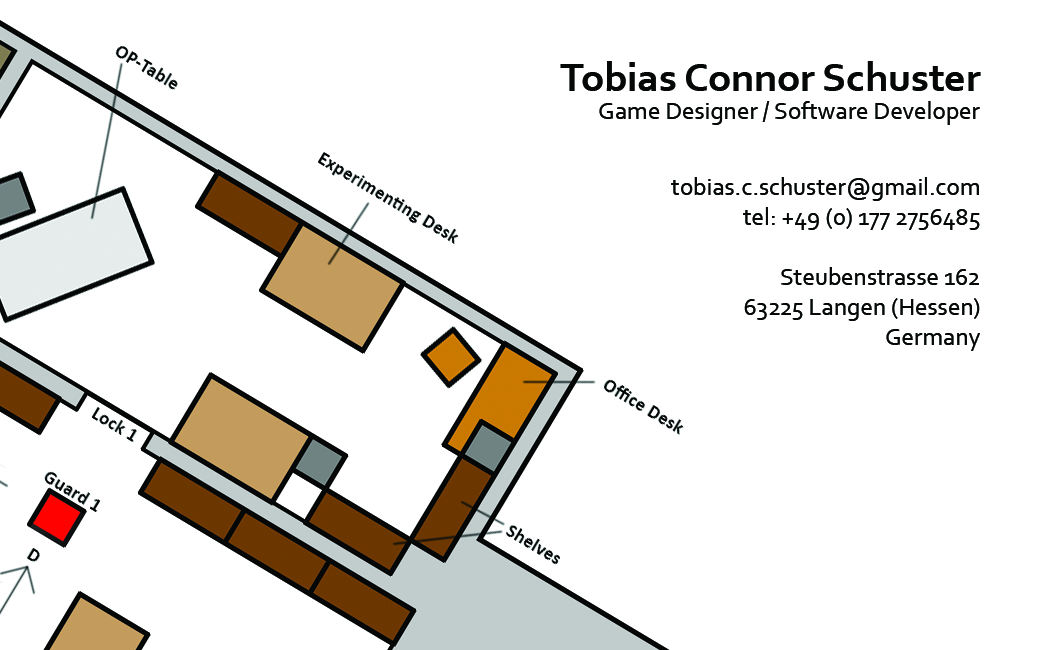
<style>
.page{position:relative;width:1039px;height:650px;background:#ffffff}
.page>*{position:absolute;margin:0}
.t1{font:41.7px "Corbel-Bold";color:#060808}
.t2{font:25px "Corbel";color:#060808}
</style>
<div class="page">
<p class="t1" style="left:560px;top:61px;width:421px;height:30px">Tobias Connor Schuster</p>
<p class="t2" style="left:599px;top:101px;width:381px;height:24px">Game Designer / Software Developer</p>
<p class="t2" style="left:671px;top:177px;width:309px;height:174px;text-align:right">tobias.c.schuster@gmail.com<br>tel: +49 (0) 177 2756485<br><br>Steubenstrasse 162<br>63225 Langen (Hessen)<br>Germany</p>
</div>
